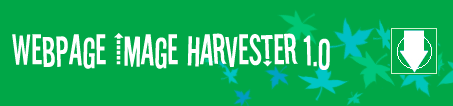
<style>
.page{position:relative;width:453px;height:106px;background:#00a747}
.page>*{position:absolute;margin:0}
.t1{font:48px "Stereofidelic";color:#ffffff}
</style>
<div class="page">
<p class="t1" style="left:12px;top:33px;width:318px;height:37px">Webpage Image Harvester 1.0</p>
</div>
